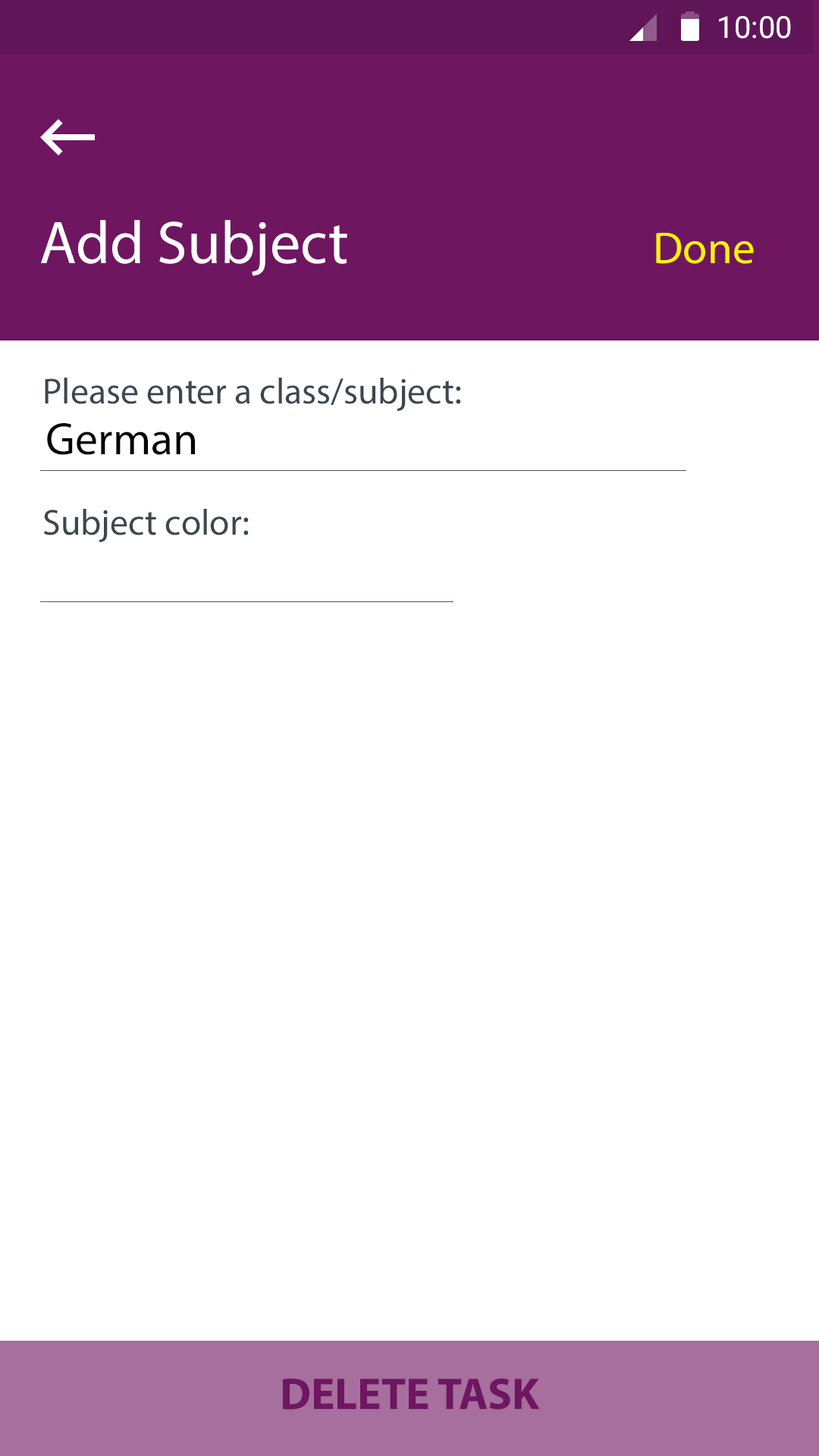
<style>
.page{position:relative;width:819px;height:1456px;background:#ffffff}
.page>*{position:absolute;margin:0}
.t1{font:30.3px "Roboto-Regular";color:#ffffff}
.t2{font:60.7px "MyriadPro-Regular";color:#ffffff}
.t3{font:44.7px "MyriadPro-Regular";color:#fff200}
.t4{font:36.4px "MyriadPro-Regular";color:#3c464f}
.t5{font:45.5px "MyriadPro-Regular";color:#000000}
.t6{font:44.7px "MyriadPro-Bold";color:#6f1661}
</style>
<div class="page">
<p class="t1" style="left:719px;top:16px;width:72px;height:23px">10:00</p>
<p class="t2" style="left:41px;top:220px;width:306px;height:56px">Add Subject</p>
<p class="t3" style="left:656px;top:233px;width:98px;height:31px">Done</p>
<p class="t4" style="left:45px;top:378px;width:416px;height:33px">Please enter a class/subject:</p>
<p class="t5" style="left:47px;top:423px;width:148px;height:32px">German</p>
<p class="t4" style="left:44px;top:509px;width:205px;height:33px">Subject color:</p>
<p class="t6" style="left:283px;top:1378px;width:257px;height:32px">DELETE TASK</p>
</div>
